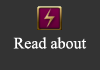
<style>
.page{position:relative;width:100px;height:70px;background:#333333}
.page>*{position:absolute;margin:0}
.t1{font:16px "TimesNewRomanPSMT";color:#ffffff}
</style>
<div class="page">
<p class="t1" style="left:13px;top:37px;width:74px;height:12px">Read about</p>
</div>
